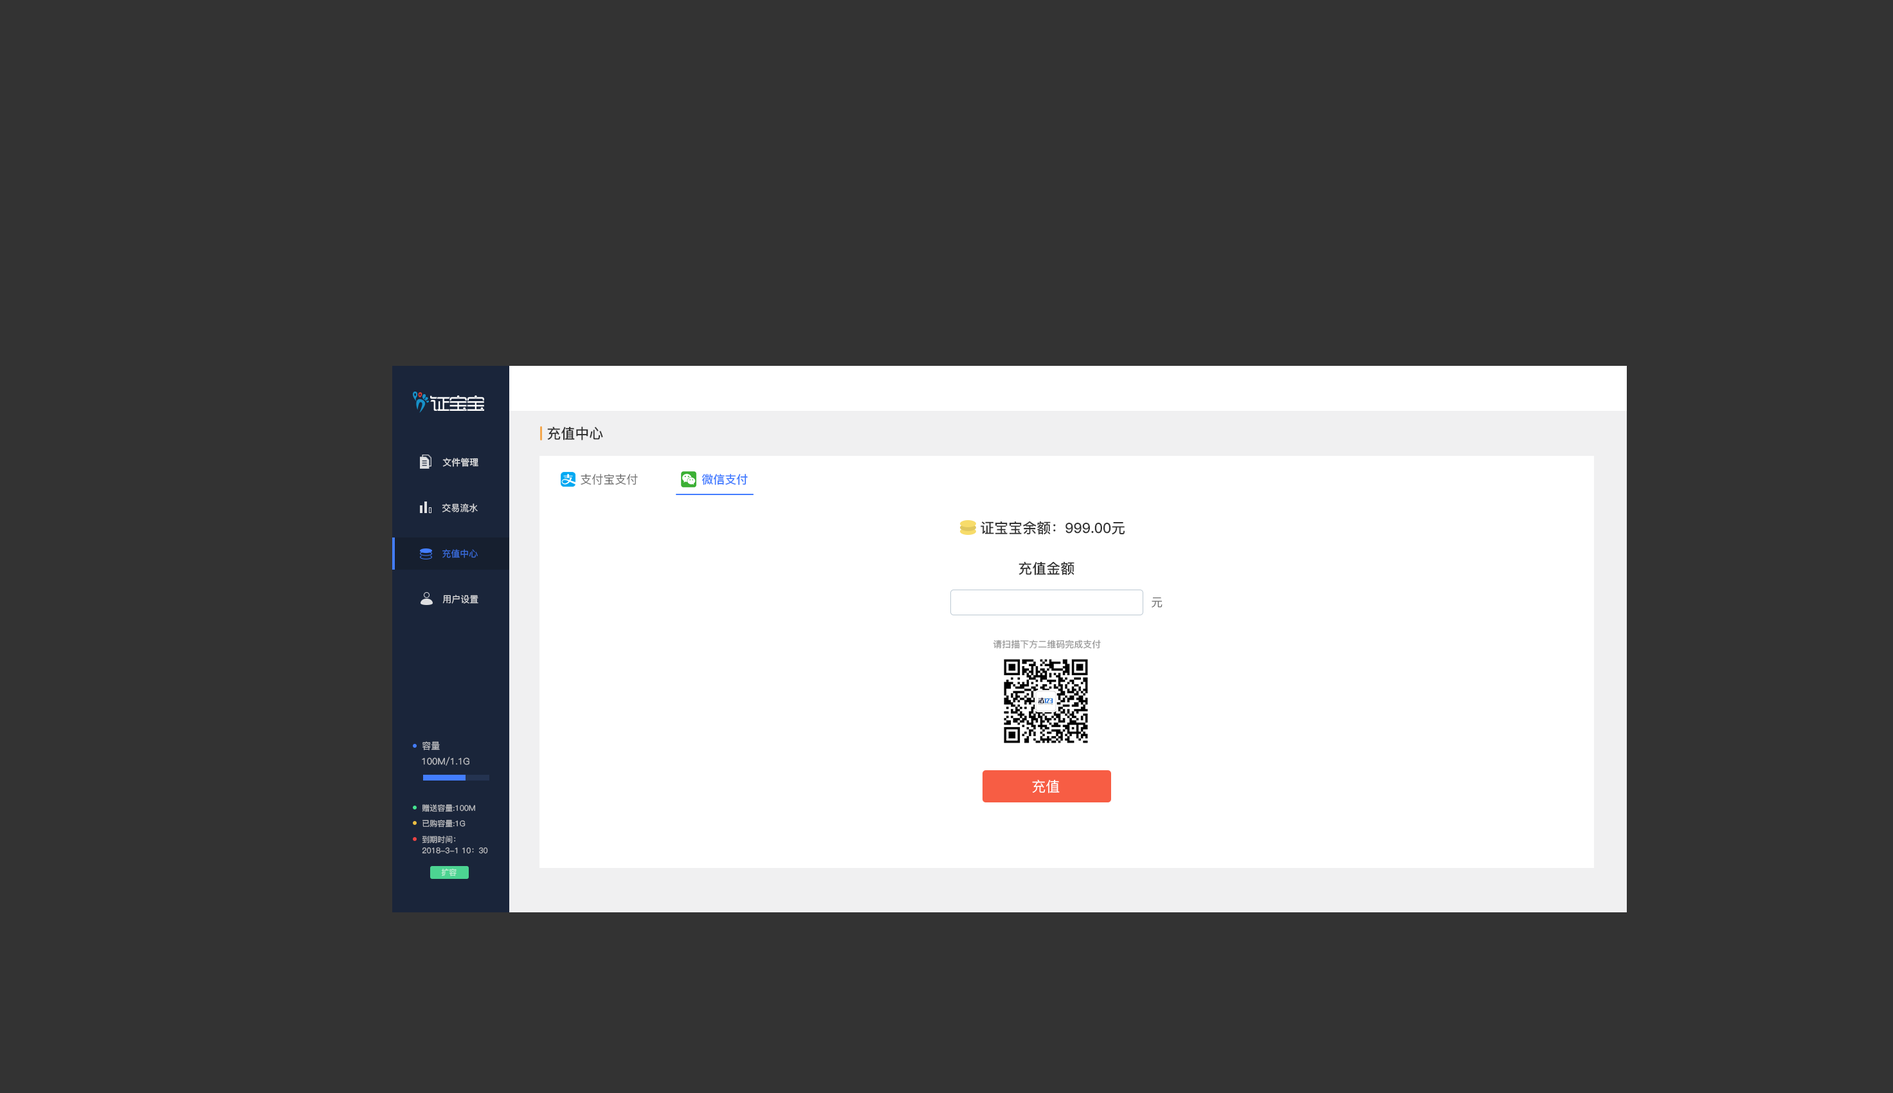
<style>
.page{position:relative;width:1893px;height:1093px;background:#333333}
.page>*{position:absolute;margin:0}
.t1{font:14.1px "PingFang-SC-Bold";color:#333333}
.t2{font:9px "PingFang-SC-Bold";color:#dedfe1}
.t3{font:11.6px "PingFang-SC-Medium";color:#666666}
.t4{font:11.6px "PingFang-SC-Bold";color:#437dff}
.t5{font:9px "PingFang-SC-Medium";color:#dfdfe1}
.t6{font:9px "PingFang-SC-Medium";color:#3c6ee0}
.t7{font:9px "PingFang-SC-Bold";color:#999999}
.t8{font:9px "PingFang-SC-Medium";color:#c1c2c6}
.t9{font:14.1px "PingFang-SC-Medium";color:#ffffff}
.t10{font:7.7px "PingFang-SC-Medium";color:#c1c2c6}
.t11{font:7.7px "PingFang-SC-Medium"}
</style>
<div class="page">
<p class="t1" style="left:547px;top:426px;width:56px;height:14px">充值中心</p>
<p class="t2" style="left:442px;top:458px;width:36px;height:9px">文件管理</p>
<p class="t3" style="left:580px;top:474px;width:58px;height:11px">支付宝支付</p>
<p class="t4" style="left:701px;top:474px;width:47px;height:11px">微信支付</p>
<p class="t5" style="left:442px;top:503px;width:36px;height:9px">交易流水</p>
<p class="t1" style="left:980px;top:521px;width:144px;height:14px">证宝宝余额：999.00元</p>
<p class="t6" style="left:442px;top:549px;width:36px;height:9px">充值中心</p>
<p class="t1" style="left:1018px;top:561px;width:56px;height:14px">充值金额</p>
<p class="t5" style="left:442px;top:595px;width:36px;height:9px">用户设置</p>
<p class="t3" style="left:1151px;top:597px;width:11px;height:11px">元</p>
<p class="t7" style="left:993px;top:640px;width:108px;height:9px">请扫描下方二维码完成支付</p>
<p class="t8" style="left:422px;top:741px;width:18px;height:9px">容量</p>
<p class="t8" style="left:422px;top:757px;width:47px;height:9px">100M/1.1G</p>
<p class="t9" style="left:1032px;top:779px;width:27px;height:14px">充值</p>
<p class="t10" style="left:422px;top:804px;width:53px;height:8px">赠送容量:100M</p>
<p class="t10" style="left:422px;top:820px;width:43px;height:7px">已购容量:1G</p>
<p class="t10" style="left:422px;top:836px;width:34px;height:7px">到期时间：</p>
<p class="t10" style="left:422px;top:847px;width:66px;height:7px">2018-3-1 10：30</p>
<p class="t11" style="left:441px;top:869px;width:15px;height:7px">扩容</p>
</div>
